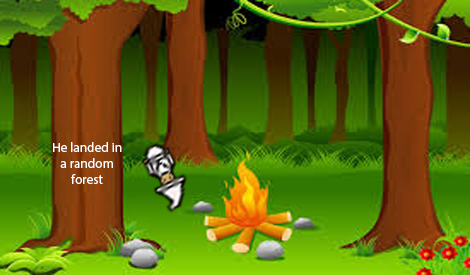
<style>
.page{position:relative;width:470px;height:275px}
.page>*{position:absolute;margin:0}
.t1{font:13.3px "MyriadPro-Regular";color:#ffffff}
</style>
<div class="page">
<p class="t1" style="left:53px;top:142px;width:69px;height:42px;text-align:center">He landed in<br>a random<br>forest</p>
</div>
